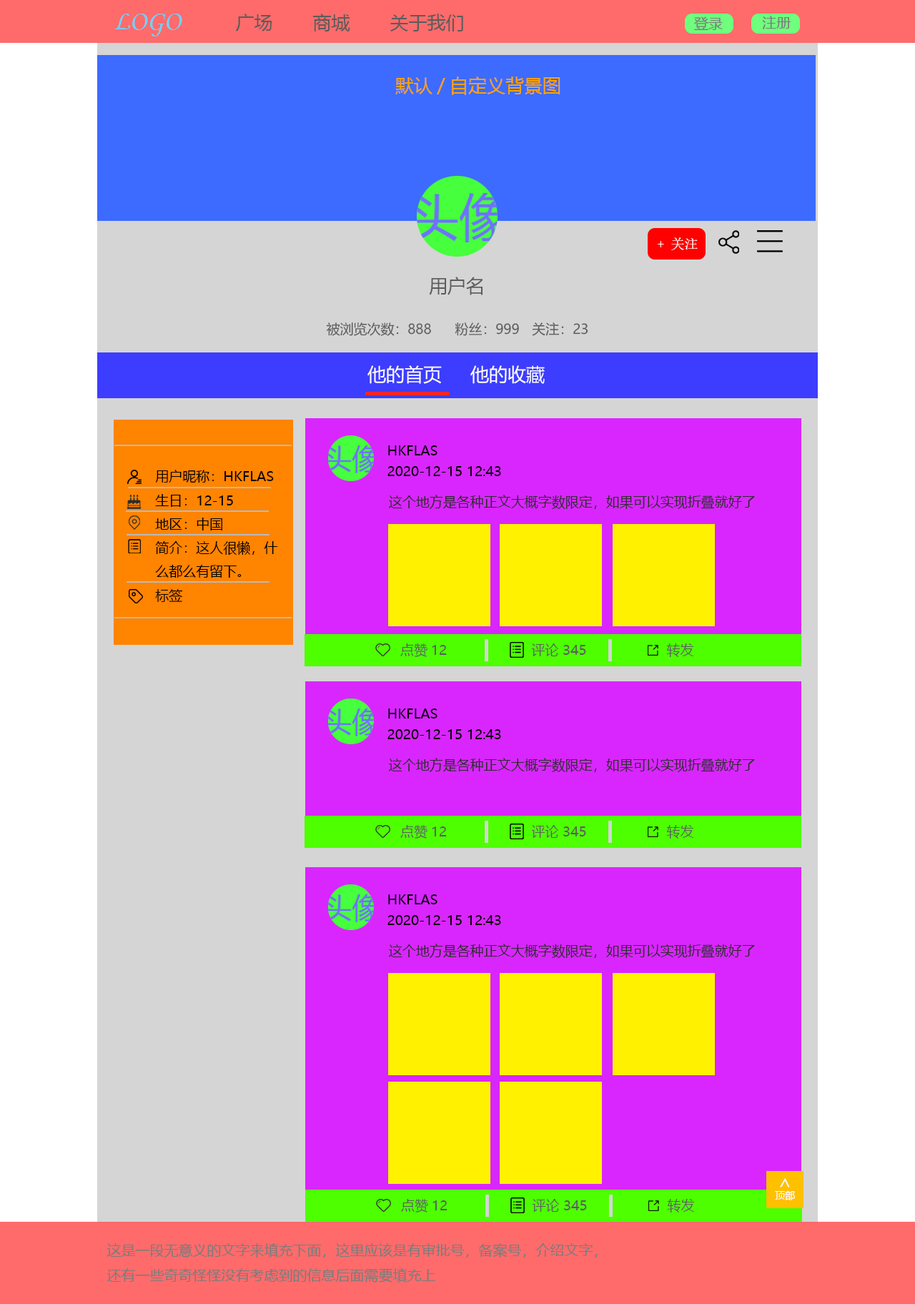
<style>
.page{position:relative;width:915px;height:1304px}
.page>*{position:absolute;margin:0}
.t1{font:18.6px "MicrosoftYaHei";color:#5c5c5c}
.t2{font:18.6px "MicrosoftYaHei";color:#ffa200}
.t3{font:13.6px "SimSun";color:#ffffff}
.t4{font:13.6px "MicrosoftYaHei";color:#5c5c5c}
.t5{font:18.6px "MicrosoftYaHei";color:#ffffff}
.t6{font:13.6px "MicrosoftYaHei";color:#010101}
.t7{font:13.6px "MicrosoftYaHei";color:#000000}
.t8{font:13.6px "MicrosoftYaHei";color:#2c2c2c}
.t9{font:10px "MicrosoftYaHei";color:#ffffff}
</style>
<div class="page">
<p class="t1" style="left:235px;top:14px;width:228px;height:17px">广场  商城  关于我们</p>
<p class="t2" style="left:395px;top:76px;width:165px;height:19px">默认/自定义背景图</p>
<p class="t3" style="left:657px;top:237px;width:41px;height:13px">+ 关注</p>
<p class="t1" style="left:429px;top:277px;width:53px;height:18px">用户名</p>
<p class="t4" style="left:326px;top:322px;width:262px;height:14px">被浏览次数：888 粉丝：999 关注：23</p>
<p class="t5" style="left:367px;top:365px;width:178px;height:19px">他的首页  他的收藏</p>
<p class="t6" style="left:388px;top:445px;width:49px;height:10px">HKFLAS</p>
<p class="t7" style="left:155px;top:470px;width:123px;height:132px">用户昵称：HKFLAS<br>生日：12-15<br>地区：中国<br>简介：这人很懒，什<br>么都么有留下。<br>标签</p>
<p class="t7" style="left:387px;top:466px;width:114px;height:10px">2020-12-15 12:43</p>
<p class="t8" style="left:389px;top:495px;width:366px;height:14px">这个地方是各种正文大概字数限定，如果可以实现折叠就好了</p>
<p class="t4" style="left:400px;top:643px;width:294px;height:14px">点赞12          评论 345                转发</p>
<p class="t6" style="left:388px;top:708px;width:49px;height:10px">HKFLAS</p>
<p class="t7" style="left:387px;top:729px;width:114px;height:10px">2020-12-15 12:43</p>
<p class="t8" style="left:389px;top:758px;width:366px;height:14px">这个地方是各种正文大概字数限定，如果可以实现折叠就好了</p>
<p class="t4" style="left:400px;top:825px;width:294px;height:13px">点赞12          评论 345                转发</p>
<p class="t6" style="left:388px;top:894px;width:49px;height:10px">HKFLAS</p>
<p class="t7" style="left:387px;top:915px;width:114px;height:10px">2020-12-15 12:43</p>
<p class="t8" style="left:389px;top:943px;width:366px;height:15px">这个地方是各种正文大概字数限定，如果可以实现折叠就好了</p>
<p class="t5" style="left:780px;top:1178px;width:10px;height:9px;rotate:-90deg">&gt;</p>
<p class="t9" style="left:775px;top:1190px;width:20px;height:10px">顶部</p>
<p class="t4" style="left:401px;top:1198px;width:294px;height:14px">点赞12          评论 345                转发</p>
</div>
